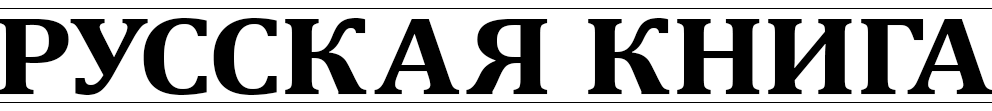
<style>
.page{position:relative;width:992px;height:111px;background:#ffffff}
.page>*{position:absolute;margin:0}
.t1{font:112.2px "Cambria-Bold";color:#000000;scale:1.16 1}
</style>
<div class="page">
<p class="t1" style="left:0px;top:18px;width:993px;height:77px">РУССКАЯ КНИГА</p>
</div>
